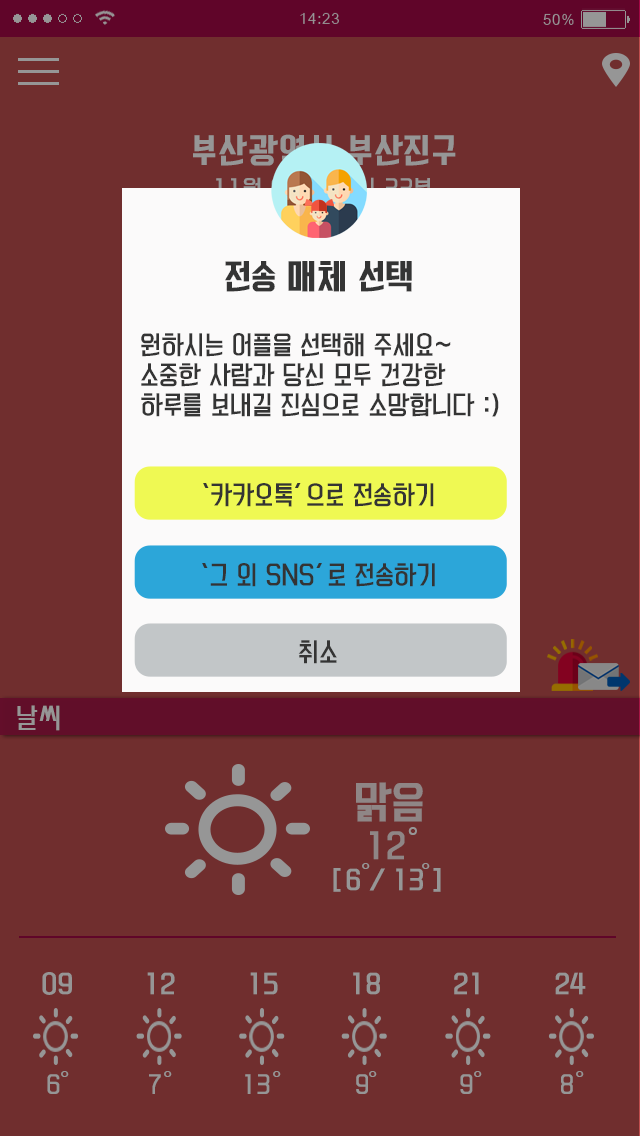
<style>
.page{position:relative;width:640px;height:1136px;background:#702e2e}
.page>*{position:absolute;margin:0}
.t1{font:32px "KoreanYNMYT-B";letter-spacing:0.025em;color:#969696}
.t2{font:32px "KoreanYNMYT-B";color:#343434}
.t3{font:24px/30px "KoreanYNMYT-L";color:#343434}
.t4{font:24px "KoreanYNMYT-L";color:#343434}
.t5{font:28px "MoeumTR-HM";letter-spacing:0.025em;color:#969696}
.t6{font:40.4px "KoreanYNMYT-L";color:#8f8686;font-weight:bold}
.t7{font:31px "KoreanYNMYT-M";color:#8f8686}
.t8{font:32.1px "MoeumTR-HM";color:#969696}
.t9{font:24px "KoreanYNMYT-M";color:#969696}
.t10{font:28px "MoeumTR-HM";color:#969696}
.t11{font:22px "KoreanYNMYT-L";color:#969696}
</style>
<div class="page">
<p class="t1" style="left:193px;top:134px;width:263px;height:32px">부산광역시 부산진구</p>
<p class="t2" style="left:225px;top:261px;width:187px;height:31px">전송 매체 선택</p>
<p class="t3" style="left:141px;top:333px;width:358px;height:84px">원하시는 어플을 선택해 주세요~<br>소중한 사람과 당신 모두 건강한 <br>하루를 보내길 진심으로 소망합니다 :)</p>
<p class="t4" style="left:203px;top:483px;width:231px;height:24px">‘카카오톡’으로 전송하기</p>
<p class="t4" style="left:202px;top:563px;width:233px;height:24px">‘그 외 SNS’로 전송하기</p>
<p class="t4" style="left:298px;top:640px;width:39px;height:24px">취소</p>
<p class="t5" style="left:17px;top:705px;width:43px;height:26px">날씨</p>
<p class="t6" style="left:356px;top:782px;width:67px;height:40px">맑음</p>
<p class="t7" style="left:370px;top:831px;width:35px;height:29px">12</p>
<p class="t8" style="left:408px;top:827px;width:9px;height:8px">°</p>
<p class="t9" style="left:333px;top:868px;width:108px;height:24px">[ 6 / 13 ]</p>
<p class="t10" style="left:362px;top:863px;width:8px;height:6px">°</p>
<p class="t10" style="left:422px;top:863px;width:8px;height:6px">°</p>
<p class="t9" style="left:42px;top:972px;width:544px;height:23px">09          12         15          18         21          24</p>
<p class="t10" style="left:61px;top:1071px;width:8px;height:6px">°</p>
<p class="t10" style="left:164px;top:1071px;width:8px;height:6px">°</p>
<p class="t10" style="left:273px;top:1071px;width:8px;height:6px">°</p>
<p class="t10" style="left:369px;top:1071px;width:8px;height:6px">°</p>
<p class="t10" style="left:474px;top:1071px;width:8px;height:6px">°</p>
<p class="t10" style="left:576px;top:1071px;width:8px;height:6px">°</p>
<p class="t11" style="left:47px;top:1074px;width:526px;height:20px">6               7               13           9             9            8</p>
</div>
